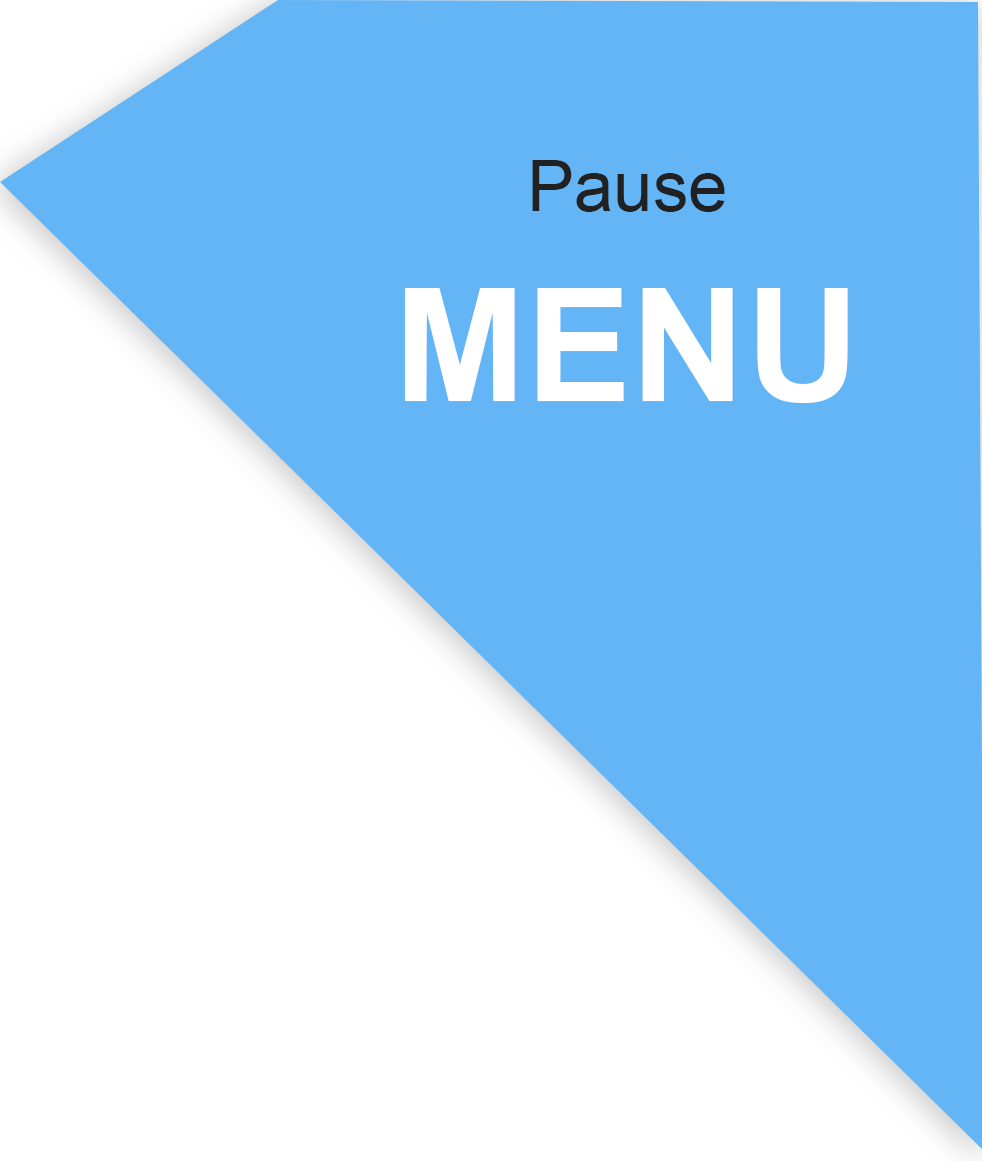
<style>
.page{position:relative;width:982px;height:1161px;background:#64b5f6}
.page>*{position:absolute;margin:0}
.t1{font:70.8px "ArialMT";color:#212121}
.t2{font:158.3px "Arial-BoldMT";color:#ffffff}
</style>
<div class="page">
<p class="t1" style="left:405px;top:160px;width:443px;height:243px;text-align:center">Pause<br><span class="t2">MENU</span></p>
</div>
